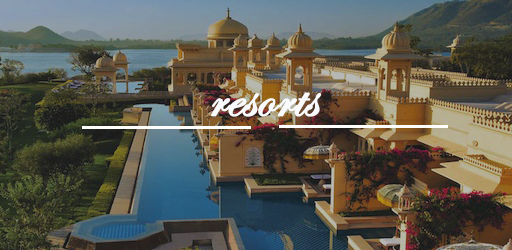
<style>
.page{position:relative;width:512px;height:250px}
.page>*{position:absolute;margin:0}
.t1{font:60px "EdwardianScriptITC";color:#f9fafb;font-weight:bold}
</style>
<div class="page">
<p class="t1" style="left:210px;top:92px;width:111px;height:25px">resorts</p>
</div>
